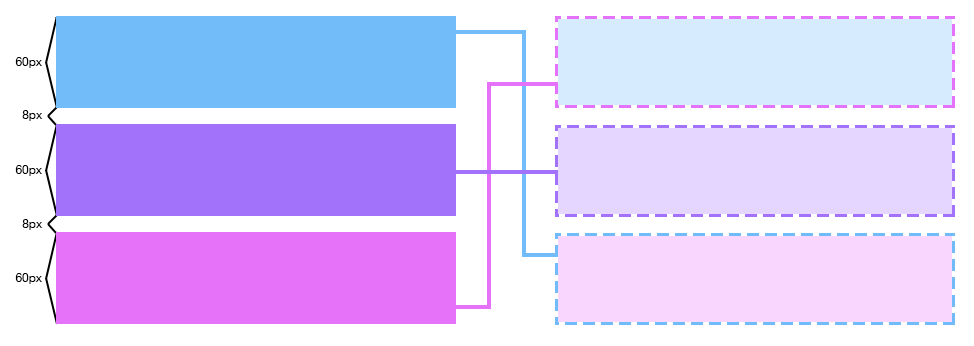
<style>
.page{position:relative;width:974px;height:346px;background:#ffffff}
.page>*{position:absolute;margin:0}
.t1{font:12px "HelveticaNeue";color:#000000}
</style>
<div class="page">
<p class="t1" style="left:15px;top:57px;width:27px;height:11px">60px</p>
<p class="t1" style="left:22px;top:110px;width:21px;height:11px">8px</p>
<p class="t1" style="left:15px;top:165px;width:27px;height:11px">60px</p>
<p class="t1" style="left:22px;top:219px;width:21px;height:11px">8px</p>
<p class="t1" style="left:15px;top:273px;width:27px;height:11px">60px</p>
</div>
